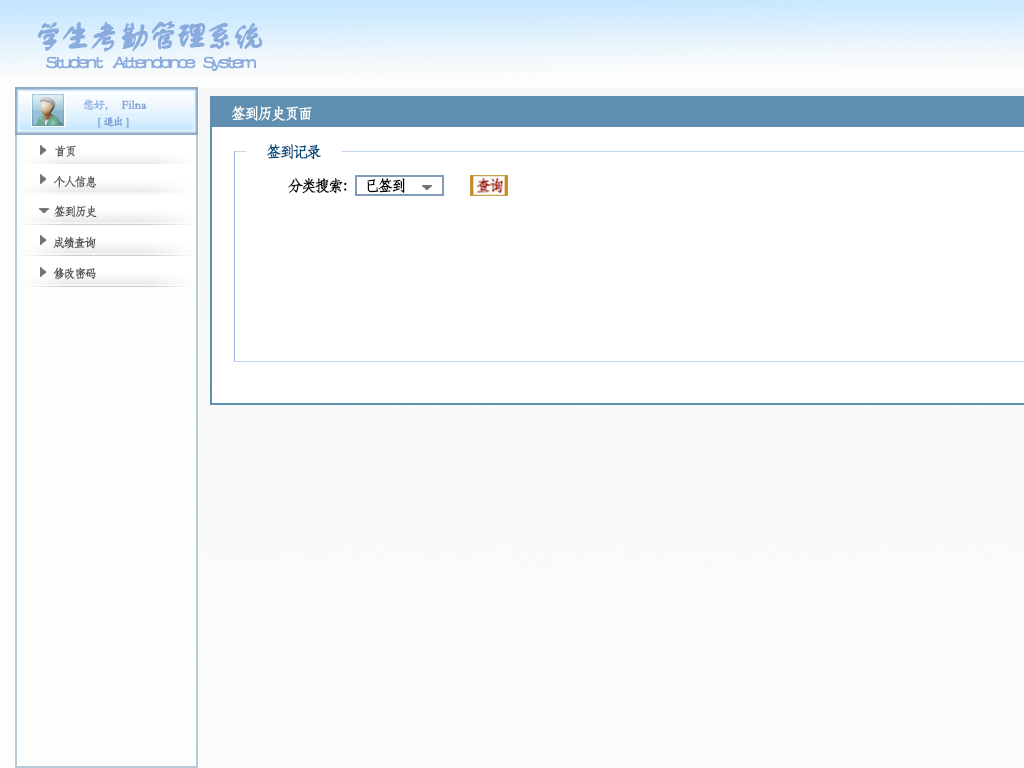
<style>
.page{position:relative;width:1024px;height:768px;background:#ffffff}
.page>*{position:absolute;margin:0}
.t1{font:32.7px "FZSTK--GBK1-0";letter-spacing:-0.15em;color:#89abde;font-weight:bold}
.t2{font:19.6px "FZSTK--GBK1-0";letter-spacing:-0.15em;color:#89abde;font-weight:bold}
.t3{font:12px "STKaiti";letter-spacing:-0.15em;color:#99b7e5;font-weight:bold}
.t4{font:12px "STKaiti";color:#789cd3;font-weight:bold}
.t5{font:15.3px "STFangsong";letter-spacing:-0.15em;color:#fdfefe;font-weight:bold}
.t6{font:10.9px "STKaiti";letter-spacing:-0.15em;color:#789cd3;font-weight:bold}
.t7{font:12px "STFangsong";letter-spacing:-0.15em;color:#555555;font-weight:bold}
.t8{font:15.3px "STFangsong";letter-spacing:-0.15em;color:#014e82;font-weight:bold}
.t9{font:15.3px "STFangsong";letter-spacing:-0.15em;color:#030303;font-weight:bold}
</style>
<div class="page">
<p class="t1" style="left:37px;top:21px;width:226px;height:31px">学生考勤管理系统</p>
<p class="t2" style="left:46px;top:56px;width:211px;height:16px">Student     Attendance    System</p>
<p class="t3" style="left:83px;top:99px;width:25px;height:12px">您好，</p>
<p class="t4" style="left:121px;top:100px;width:26px;height:9px">Filna</p>
<p class="t5" style="left:231px;top:105px;width:81px;height:16px">签到历史页面</p>
<p class="t6" style="left:98px;top:116px;width:31px;height:12px">[   退出   ]</p>
<p class="t7" style="left:55px;top:145px;width:21px;height:12px">首页</p>
<p class="t8" style="left:267px;top:144px;width:54px;height:16px">签到记录</p>
<p class="t7" style="left:53px;top:175px;width:43px;height:13px">个人信息</p>
<p class="t9" style="left:288px;top:178px;width:59px;height:16px">分类搜索：</p>
<p class="t9" style="left:367px;top:178px;width:38px;height:15px">已签到</p>
<p class="t7" style="left:54px;top:205px;width:43px;height:13px">签到历史</p>
<p class="t7" style="left:53px;top:236px;width:43px;height:13px">成绩查询</p>
<p class="t7" style="left:53px;top:267px;width:43px;height:13px">修改密码</p>
</div>
